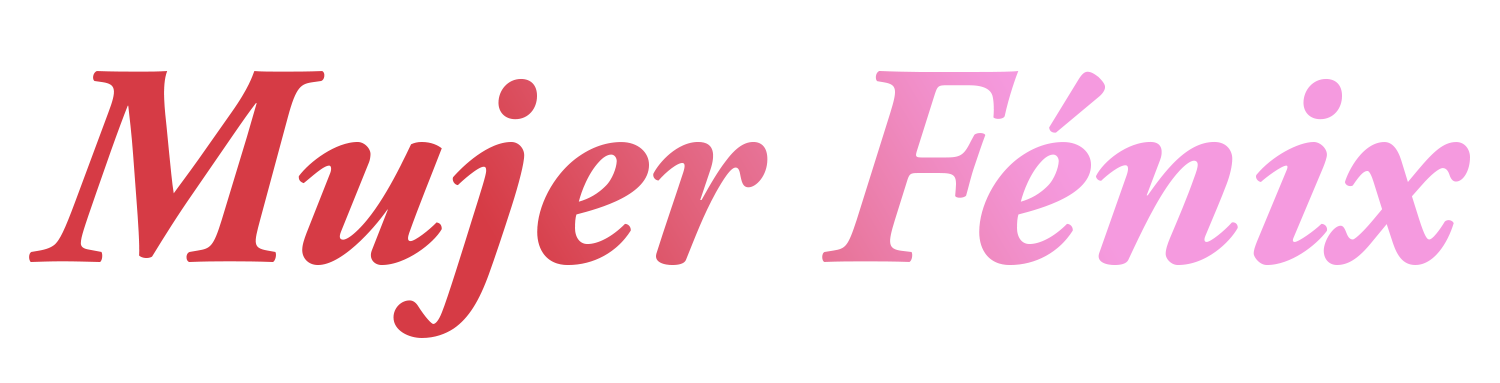
<style>
.page{position:relative;width:1500px;height:383px;background:#ffffff}
.page>*{position:absolute;margin:0}
.t1{font:286.8px "AGaramondPro-BoldItalic"}
</style>
<div class="page">
<p class="t1" style="left:29px;top:71px;width:1441px;height:267px">Mujer Fénix</p>
</div>
